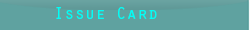
<style>
.page{position:relative;width:250px;height:30px;background:#5fa2a0}
.page>*{position:absolute;margin:0}
.t1{font:16.7px "OratorStd";color:#00fef6;scale:1.04 1}
</style>
<div class="page">
<p class="t1" style="left:56px;top:7px;width:101px;height:12px">Issue Card</p>
</div>
